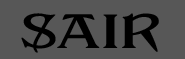
<style>
.page{position:relative;width:185px;height:59px;background:#575757}
.page>*{position:absolute;margin:0}
.t1{font:51.4px "Cabaletta";color:#000000;scale:1.55 1}
</style>
<div class="page">
<p class="t1" style="left:21px;top:13px;width:138px;height:40px">Sair</p>
</div>
